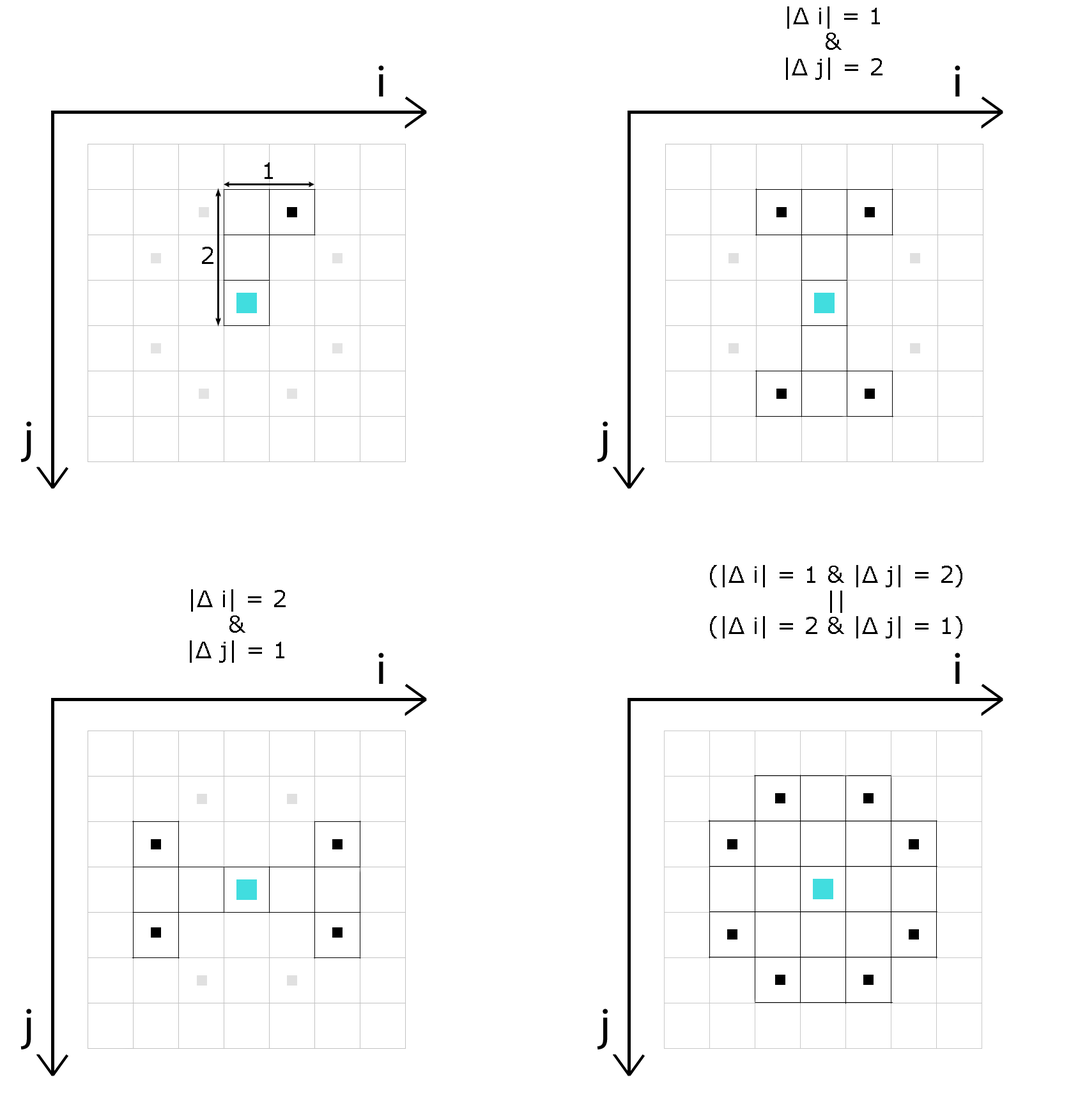
<style>
.page{position:relative;width:1071px;height:1114px;background:#ffffff}
.page>*{position:absolute;margin:0}
.t1{font:23px/25.6px "MSReferenceSansSerif";color:#000000}
.t2{font:23px "MSReferenceSansSerif";color:#000000}
</style>
<div class="page">
<p class="t1" style="left:786px;top:6px;width:96px;height:74px;text-align:center">|Δ i| = 1<br>&amp;<br>|Δ j| = 2</p>
<p class="t2" style="left:265px;top:162px;width:8px;height:17px">1</p>
<p class="t2" style="left:202px;top:247px;width:11px;height:17px">2</p>
<p class="t1" style="left:710px;top:565px;width:252px;height:73px;text-align:center">(|Δ i| = 1 &amp; |Δ j| = 2)<br>||<br>(|Δ i| = 2 &amp; |Δ j| = 1)</p>
<p class="t1" style="left:190px;top:589px;width:96px;height:74px;text-align:center">|Δ i| = 2<br>&amp;<br>|Δ j| = 1</p>
</div>
